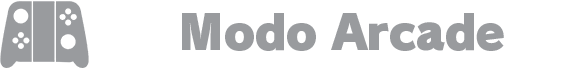
<style>
.page{position:relative;width:584px;height:70px;background:#ffffff}
.page>*{position:absolute;margin:0}
.t1{font:48px "RodinNTLGPro-UB";letter-spacing:-0.036em;color:#999b9e}
</style>
<div class="page">
<p class="t1" style="left:182px;top:13px;width:322px;height:38px">Modo Arcade</p>
</div>
